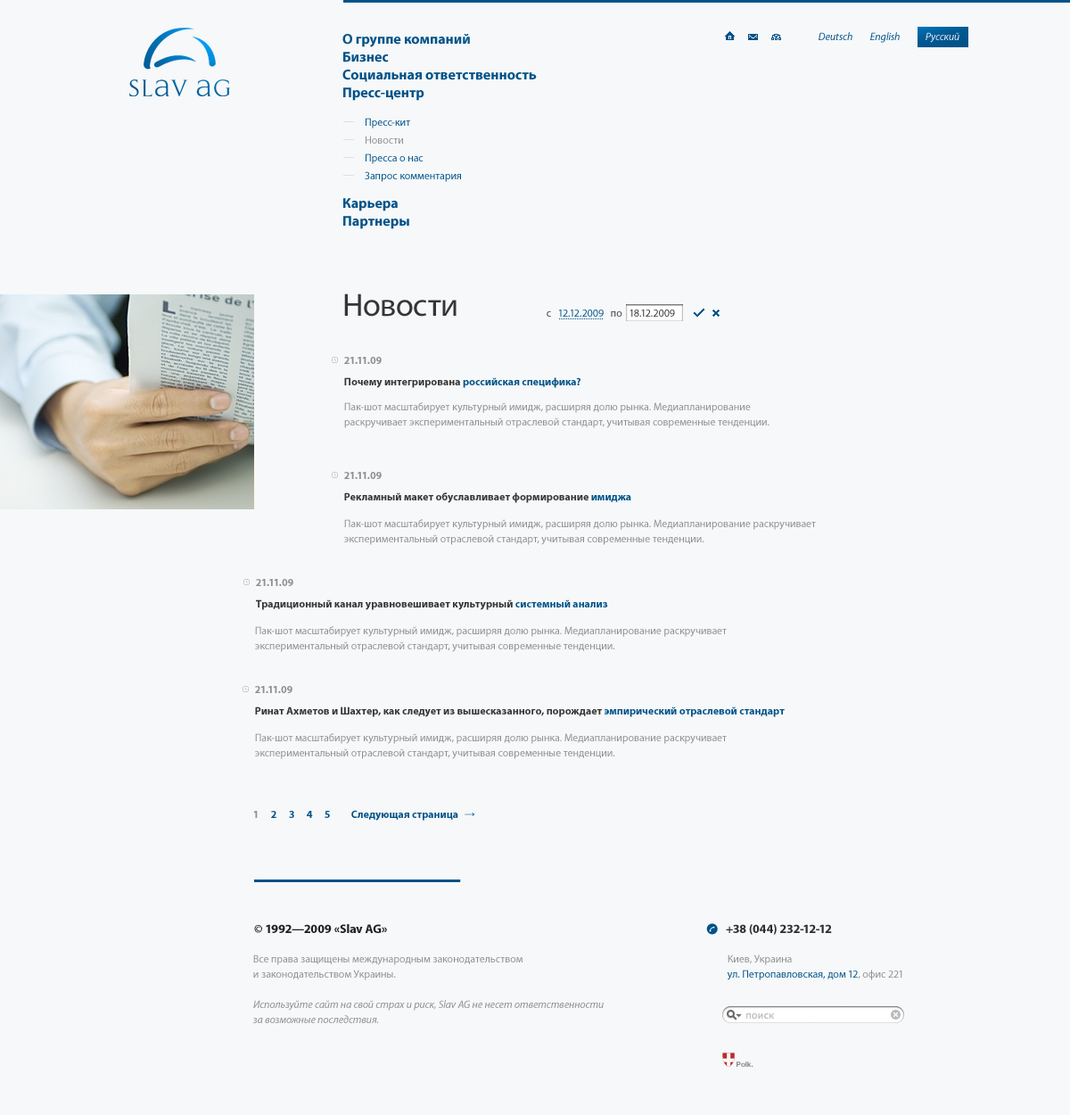
<style>
.page{position:relative;width:1070px;height:1115px;background:#f6f8f9}
.page>*{position:absolute;margin:0}
.t1{font:14.3px "MyriadPro-Bold";color:#005288}
.t2{font:10.7px "MyriadPro-It";color:#005288}
.t3{font:10.7px "MyriadPro-It";color:#eaeef1}
.t4{font:10.7px "MyriadPro-Regular";color:#005288}
.t5{font:10.7px "MyriadPro-Regular";color:#8e8e8e}
.t6{font:32.1px "MyriadPro-Regular";color:#343534}
.t7{font:10.7px "MyriadPro-Regular";color:#343534}
.t8{font:10.7px "MyriadPro-Bold";color:#8e8e8e}
.t9{font:10.7px "MyriadPro-Bold";color:#005288}
.t10{font:10.7px "MyriadPro-Bold";color:#343534}
.t11{font:10.7px/15.2px "MyriadPro-Regular";color:#8e8e8e}
.t12{font:10.7px "ArialMT"}
.t13{font:12.5px "MyriadPro-Bold";color:#212121}
.t14{font:12.5px "MyriadPro-Bold";color:#303030}
.t15{font:10.7px/15.2px "MyriadPro-It";color:#8e8e8e}
.t16{font:10.7px/15.2px "MyriadPro-Regular";color:#005288}
.t17{font:7.1px "HelveticaNeue-Bold";color:#8a8a8a}
</style>
<div class="page">
<p class="t1" style="left:342px;top:34px;width:128px;height:13px">О группе компаний</p>
<p class="t2" style="left:818px;top:32px;width:34px;height:8px">Deutsch</p>
<p class="t2" style="left:870px;top:32px;width:30px;height:11px">English</p>
<p class="t3" style="left:925px;top:32px;width:34px;height:11px">Русский</p>
<p class="t1" style="left:343px;top:52px;width:46px;height:10px">Бизнес</p>
<p class="t1" style="left:342px;top:70px;width:195px;height:12px">Социальная ответственность</p>
<p class="t1" style="left:343px;top:87px;width:81px;height:14px">Пресс-центр</p>
<p class="t4" style="left:366px;top:118px;width:44px;height:10px">Пресс-кит</p>
<p class="t5" style="left:366px;top:136px;width:37px;height:8px">Новости</p>
<p class="t4" style="left:366px;top:153px;width:58px;height:11px">Пресса о нас</p>
<p class="t4" style="left:365px;top:171px;width:96px;height:11px">Запрос комментария</p>
<p class="t1" style="left:343px;top:198px;width:55px;height:13px">Карьера</p>
<p class="t1" style="left:343px;top:216px;width:66px;height:13px">Партнеры</p>
<p class="t6" style="left:344px;top:293px;width:113px;height:24px">Новости</p>
<p class="t7" style="left:547px;top:309px;width:128px;height:8px">c   <span class="t4">12.12.2009  </span> по   18.12.2009</p>
<p class="t8" style="left:344px;top:357px;width:38px;height:7px">21.11.09</p>
<p class="t9" style="left:344px;top:377px;width:236px;height:11px"><span class="t10">Почему интегрирована </span>российская специфика?</p>
<p class="t11" style="left:344px;top:402px;width:425px;height:26px">Пак-шот масштабирует культурный имидж, расширяя долю рынка. Медиапланирование<br>раскручивает экспериментальный отраслевой стандарт, учитывая современные тенденции.</p>
<p class="t8" style="left:344px;top:472px;width:38px;height:7px">21.11.09</p>
<p class="t10" style="left:344px;top:492px;width:287px;height:11px">Рекламный макет обуславливает формирование <span class="t9">имиджа</span></p>
<p class="t11" style="left:344px;top:519px;width:472px;height:26px">Пак-шот масштабирует культурный имидж, расширяя долю рынка. Медиапланирование раскручивает<br>экспериментальный отраслевой стандарт, учитывая современные тенденции.</p>
<p class="t8" style="left:256px;top:579px;width:37px;height:7px">21.11.09</p>
<p class="t10" style="left:256px;top:599px;width:352px;height:11px">Традиционный канал уравновешивает культурный <span class="t9">системный анализ</span></p>
<p class="t11" style="left:255px;top:626px;width:472px;height:26px">Пак-шот масштабирует культурный имидж, расширяя долю рынка. Медиапланирование раскручивает<br>экспериментальный отраслевой стандарт, учитывая современные тенденции.</p>
<p class="t8" style="left:255px;top:686px;width:37px;height:7px">21.11.09</p>
<p class="t10" style="left:255px;top:706px;width:530px;height:11px">Ринат Ахметов и Шахтер, как следует из вышесказанного, порождает <span class="t9">эмпирический отраслевой стандарт</span></p>
<p class="t11" style="left:255px;top:733px;width:472px;height:26px">Пак-шот масштабирует культурный имидж, расширяя долю рынка. Медиапланирование раскручивает<br>экспериментальный отраслевой стандарт, учитывая современные тенденции.</p>
<p class="t9" style="left:351px;top:810px;width:107px;height:10px">Следующая страница</p>
<p class="t8" style="left:253px;top:810px;width:5px;height:8px">1</p>
<p class="t9" style="left:271px;top:810px;width:5px;height:8px">2</p>
<p class="t9" style="left:289px;top:810px;width:5px;height:8px">3</p>
<p class="t9" style="left:307px;top:810px;width:6px;height:8px">4</p>
<p class="t9" style="left:325px;top:810px;width:5px;height:8px">5</p>
<p class="t12" style="left:465px;top:811px;width:10px;height:5px">→</p>
<p class="t13" style="left:254px;top:924px;width:133px;height:9px">© 1992—2009 «Slav AG»</p>
<p class="t14" style="left:726px;top:924px;width:106px;height:10px">+38 (044) 232-12-12</p>
<p class="t15" style="left:252px;top:954px;width:352px;height:69px"><span class="t11">Все права защищены международным законодательством<br>и законодательством Украины.<br><br></span>Используйте сайт на свой страх и риск, Slav AG не несет ответственности<br>за возможные последствия.</p>
<p class="t16" style="left:727px;top:954px;width:175px;height:26px"><span class="t11">Киев, Украина<br></span>ул. Петропавловская, дом 12<span class="t11">, офис 221</span></p>
<p class="t17" style="left:736px;top:1061px;width:17px;height:5px">Polk.</p>
</div>
